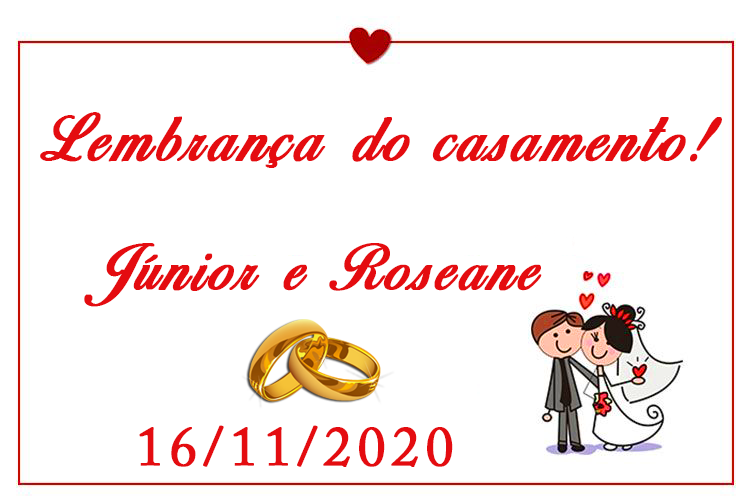
<style>
.page{position:relative;width:750px;height:500px;background:#ffffff}
.page>*{position:absolute;margin:0}
.t1{font:57.3px "BirdsofParadise-PersonaluseOnly";letter-spacing:0.095em;color:#e40c10;font-weight:bold}
.t2{font:54.7px "BirdsofParadise-PersonaluseOnly";letter-spacing:0.095em;color:#e40c10;font-weight:bold}
.t3{font:54.7px "ACaslonPro-Regular";letter-spacing:0.095em;color:#e40c10;font-weight:bold}
</style>
<div class="page">
<p class="t1" style="left:40px;top:112px;width:682px;height:56px">Lembrança do casamento!</p>
<p class="t2" style="left:84px;top:243px;width:458px;height:64px">Júnior e Roseane</p>
<p class="t3" style="left:139px;top:425px;width:314px;height:42px">16/11/2020</p>
</div>
